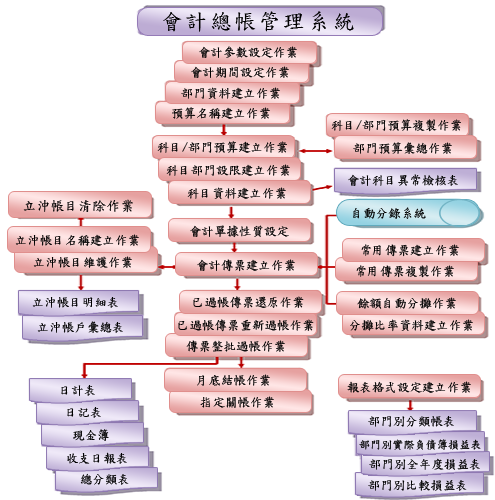
<style>
.page{position:relative;width:495px;height:500px;background:#ffffff}
.page>*{position:absolute;margin:0}
.t1{font:22.2px "DFKaiShu-SB-Estd-BF";letter-spacing:0.1em;color:#000000}
.t2{font:12.5px "DFKaiShu-SB-Estd-BF";color:#000000}
.t3{font:13.9px "DFKaiShu-SB-Estd-BF";color:#000000}
.t4{font:11.1px "DFKaiShu-SB-Estd-BF";color:#000000}
</style>
<div class="page">
<p class="t1" style="left:163px;top:11px;width:191px;height:21px">會計總帳管理系統</p>
<p class="t2" style="left:199px;top:46px;width:98px;height:12px">會計參數設定作業</p>
<p class="t2" style="left:191px;top:66px;width:98px;height:12px">會計期間設定作業</p>
<p class="t2" style="left:181px;top:87px;width:99px;height:12px">部門資料建立作業</p>
<p class="t2" style="left:172px;top:107px;width:98px;height:12px">預算名稱建立作業</p>
<p class="t2" style="left:331px;top:119px;width:130px;height:13px">科目/部門預算複製作業</p>
<p class="t2" style="left:157px;top:141px;width:130px;height:12px">科目/部門預算建立作業</p>
<p class="t2" style="left:353px;top:142px;width:99px;height:12px">部門預算彙總作業</p>
<p class="t2" style="left:166px;top:164px;width:124px;height:12px">科目部門設限建立作業</p>
<p class="t2" style="left:348px;top:174px;width:110px;height:12px">會計科目異常檢核表</p>
<p class="t2" style="left:187px;top:187px;width:99px;height:12px">科目資料建立作業</p>
<p class="t3" style="left:23px;top:199px;width:110px;height:14px">立沖帳目清除作業</p>
<p class="t2" style="left:353px;top:207px;width:73px;height:12px">自動分錄系統</p>
<p class="t2" style="left:190px;top:225px;width:99px;height:13px">會計單據性質設定</p>
<p class="t2" style="left:15px;top:234px;width:124px;height:12px">立沖帳目名稱建立作業</p>
<p class="t2" style="left:361px;top:244px;width:98px;height:13px">常用傳票建立作業</p>
<p class="t2" style="left:33px;top:256px;width:99px;height:12px">立沖帳目維護作業</p>
<p class="t2" style="left:197px;top:259px;width:98px;height:13px">會計傳票建立作業</p>
<p class="t2" style="left:356px;top:265px;width:98px;height:13px">常用傳票複製作業</p>
<p class="t2" style="left:32px;top:297px;width:86px;height:11px">立沖帳目明細表</p>
<p class="t2" style="left:193px;top:296px;width:111px;height:13px">已過帳傳票還原作業</p>
<p class="t2" style="left:357px;top:297px;width:99px;height:12px">餘額自動分攤作業</p>
<p class="t2" style="left:37px;top:321px;width:86px;height:12px">立沖帳戶彙總表</p>
<p class="t2" style="left:178px;top:319px;width:136px;height:13px">已過帳傳票重新過帳作業</p>
<p class="t2" style="left:350px;top:319px;width:123px;height:13px">分攤比率資料建立作業</p>
<p class="t2" style="left:186px;top:340px;width:99px;height:13px">傳票整批過帳作業</p>
<p class="t2" style="left:197px;top:374px;width:73px;height:12px">月底結帳作業</p>
<p class="t2" style="left:61px;top:385px;width:34px;height:11px">日計表</p>
<p class="t2" style="left:347px;top:381px;width:124px;height:12px">報表格式設定建立作業</p>
<p class="t2" style="left:200px;top:396px;width:74px;height:12px">指定關帳作業</p>
<p class="t2" style="left:67px;top:407px;width:34px;height:11px">日記表</p>
<p class="t2" style="left:368px;top:416px;width:86px;height:11px">部門別分類帳表</p>
<p class="t2" style="left:73px;top:429px;width:36px;height:12px">現金簿</p>
<p class="t4" style="left:359px;top:439px;width:122px;height:11px">部門別實際負債簿損益表</p>
<p class="t2" style="left:67px;top:452px;width:60px;height:12px">收支日報表</p>
<p class="t2" style="left:369px;top:458px;width:111px;height:12px">部門別全年度損益表</p>
<p class="t2" style="left:80px;top:473px;width:49px;height:12px">總分類表</p>
<p class="t2" style="left:368px;top:480px;width:99px;height:11px">部門別比較損益表</p>
</div>
